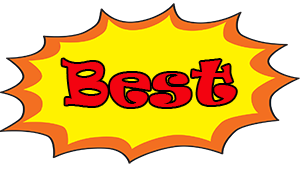
<style>
.page{position:relative;width:300px;height:169px;background:#ffffff}
.page>*{position:absolute;margin:0}
.t1{font:56.5px "Ravie";color:#e60721}
</style>
<div class="page">
<p class="t1" style="left:62px;top:59px;width:174px;height:48px">Best</p>
</div>
